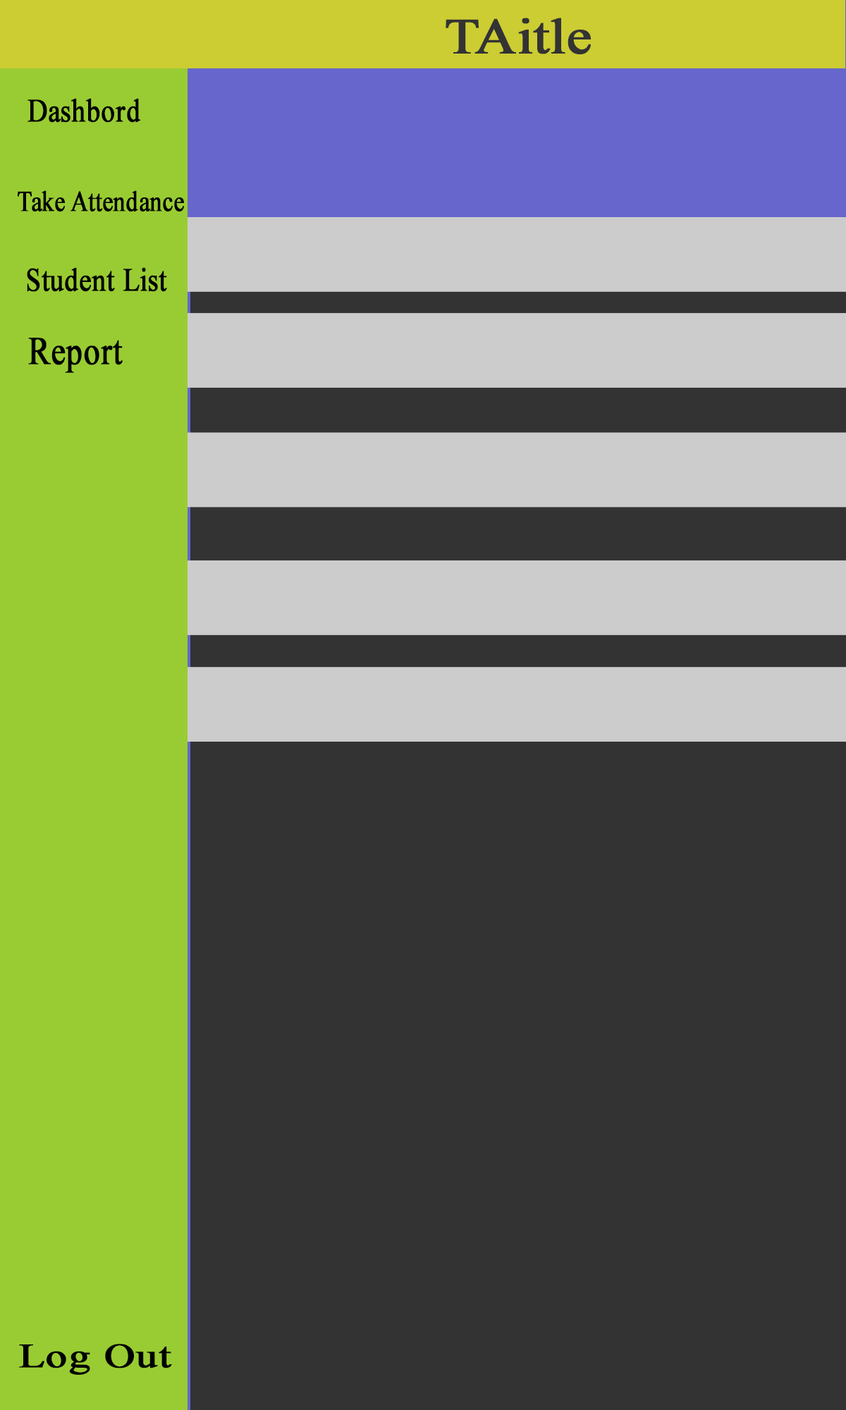
<style>
.page{position:relative;width:846px;height:1410px;background:#333333}
.page>*{position:absolute;margin:0}
.t1{font:50.2px "TimesNewRomanPSMT";color:#333333;font-weight:bold;scale:1.12 1}
.t2{font:32.8px "TimesNewRomanPSMT";color:#000000;font-weight:bold;scale:0.83 1}
.t3{font:29px "TimesNewRomanPSMT";color:#000000;font-weight:bold;scale:0.82 1}
.t4{font:39.3px "TimesNewRomanPSMT";color:#000000;font-weight:bold;scale:0.82 1}
.t5{font:34.1px "TimesNewRomanPSMT";color:#000000;font-weight:bold;scale:1.25 1}
</style>
<div class="page">
<p class="t1" style="left:445px;top:18px;width:146px;height:36px">TAitle</p>
<p class="t2" style="left:27px;top:98px;width:113px;height:25px">Dashbord</p>
<p class="t3" style="left:18px;top:190px;width:166px;height:21px">Take Attendance</p>
<p class="t2" style="left:27px;top:267px;width:140px;height:25px">Student List</p>
<p class="t4" style="left:28px;top:338px;width:95px;height:35px">Report</p>
<p class="t5" style="left:19px;top:1343px;width:153px;height:32px">Log Out</p>
</div>
